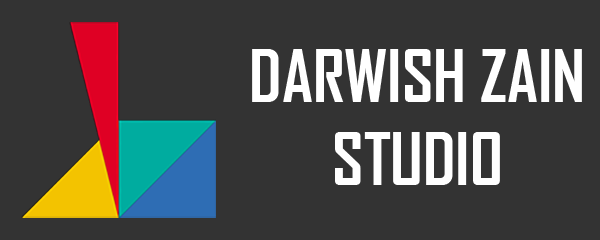
<style>
.page{position:relative;width:600px;height:240px;background:#333333}
.page>*{position:absolute;margin:0}
.t1{font:68.7px "AgencyFB-Bold";color:#ffffff}
</style>
<div class="page">
<p class="t1" style="left:252px;top:49px;width:330px;height:136px;text-align:center">DARWISH ZAIN<br>STUDIO</p>
</div>
